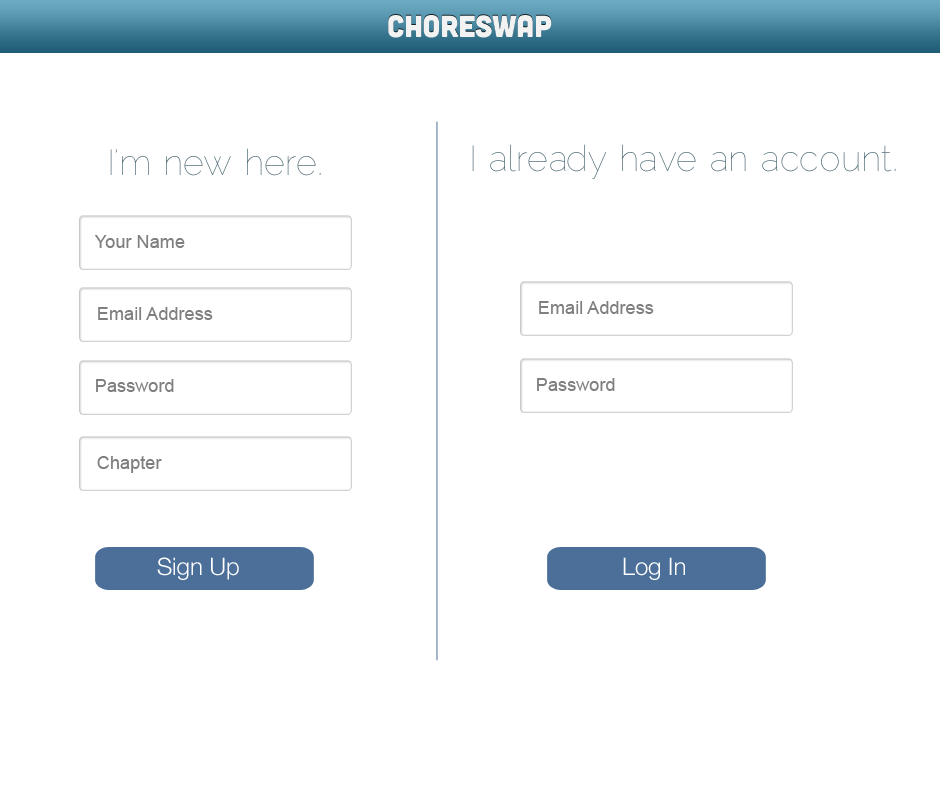
<style>
.page{position:relative;width:940px;height:800px;background:#ffffff}
.page>*{position:absolute;margin:0}
.t1{font:30.5px "Cubano-Regular";color:#f2f2f2}
.t2{font:36px "Raleway-Thin";color:#536e79}
.t3{font:18.2px "ArialMT";color:#7f7f7f}
.t4{font:24px "HelveticaNeue-Light";color:#ffffff}
</style>
<div class="page">
<p class="t1" style="left:388px;top:15px;width:164px;height:23px">choreswap</p>
<p class="t2" style="left:110px;top:148px;width:211px;height:28px">I’m new here.</p>
<p class="t2" style="left:472px;top:144px;width:424px;height:35px">I already have an account.</p>
<p class="t3" style="left:94px;top:235px;width:91px;height:13px">Your Name</p>
<p class="t3" style="left:539px;top:301px;width:115px;height:13px">Email Address</p>
<p class="t3" style="left:98px;top:307px;width:115px;height:13px">Email Address</p>
<p class="t3" style="left:96px;top:379px;width:78px;height:13px">Password</p>
<p class="t3" style="left:537px;top:378px;width:78px;height:13px">Password</p>
<p class="t3" style="left:97px;top:456px;width:65px;height:17px">Chapter</p>
<p class="t4" style="left:157px;top:557px;width:82px;height:23px">Sign Up</p>
<p class="t4" style="left:623px;top:557px;width:62px;height:23px">Log In</p>
</div>
